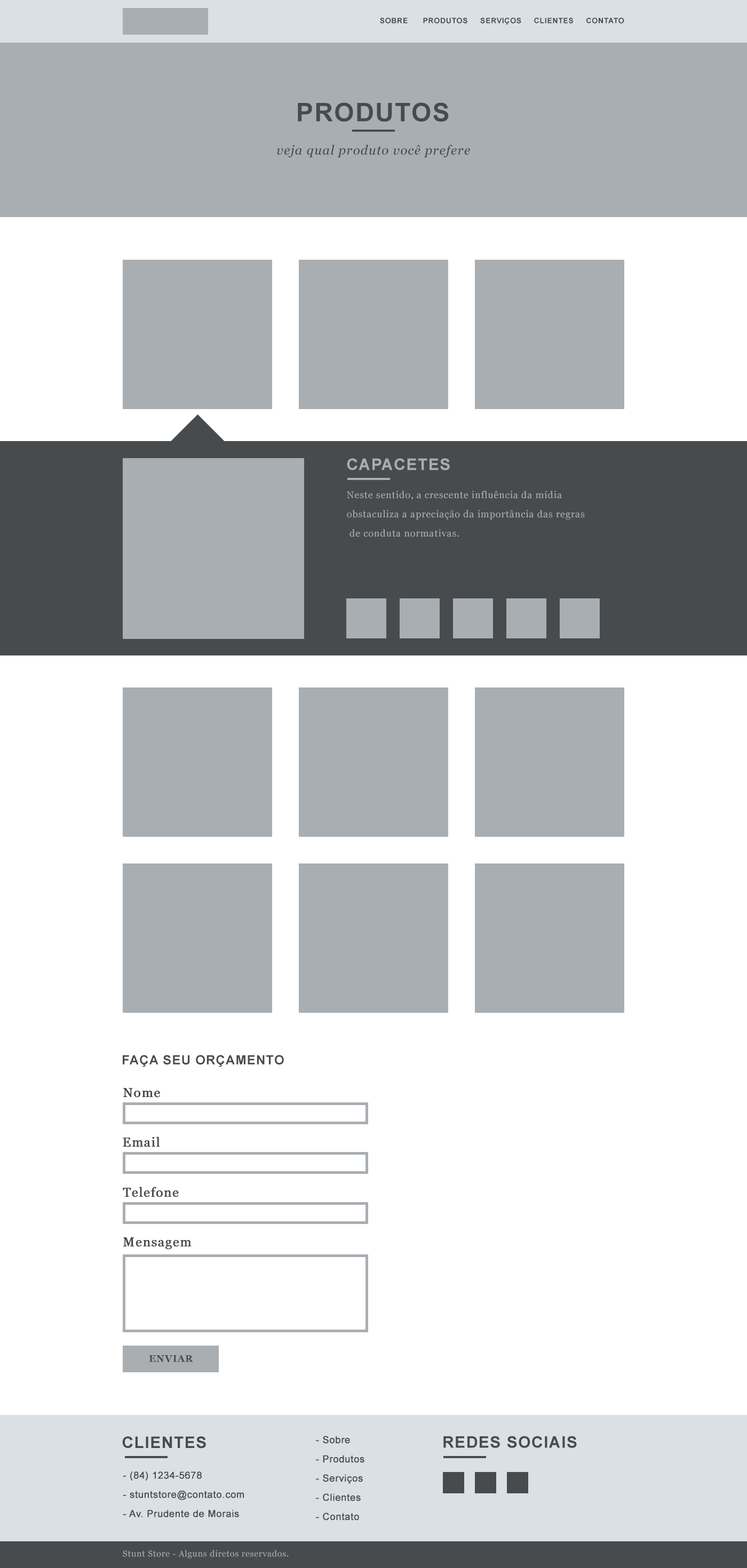
<style>
.page{position:relative;width:747px;height:1568px;background:#ffffff}
.page>*{position:absolute;margin:0}
.t1{font:7.5px "Arial-BoldMT";letter-spacing:0.05em;color:#484b4d;text-transform:uppercase}
.t2{font:25.6px "Arial-BoldMT";letter-spacing:0.05em;color:#484b4d;text-transform:uppercase}
.t3{font:12.8px "Georgia-Italic";letter-spacing:0.05em;color:#484b4d}
.t4{font:16px "Arial-BoldMT";letter-spacing:0.05em;color:#a9aeb3;text-transform:uppercase}
.t5{font:9.6px/19.2px "Georgia";letter-spacing:0.05em;color:#a9aeb3}
.t6{font:12.8px "Arial-BoldMT";letter-spacing:0.05em;color:#484b4d;text-transform:uppercase}
.t7{font:12.8px "Georgia";letter-spacing:0.05em;color:#484b4d;font-weight:bold}
.t8{font:9.6px "Georgia-Bold";letter-spacing:0.05em;color:#484b4d;text-transform:uppercase}
.t9{font:16px "Arial-BoldMT";letter-spacing:0.05em;color:#484b4d;text-transform:uppercase}
.t10{font:9.6px/19.2px "ArialMT";letter-spacing:0.025em;color:#484b4d;font-weight:bold}
.t11{font:8.5px "Georgia";letter-spacing:0.05em;color:#a9aeb3}
</style>
<div class="page">
<p class="t1" style="left:380px;top:18px;width:244px;height:7px">Sobre      produtos     serviços     Clientes     contato</p>
<p class="t2" style="left:298px;top:102px;width:151px;height:20px">produtos</p>
<p class="t3" style="left:276px;top:145px;width:194px;height:12px">veja qual produto você prefere</p>
<p class="t4" style="left:347px;top:458px;width:103px;height:12px">capacetes</p>
<p class="t5" style="left:347px;top:491px;width:238px;height:46px">Neste sentido, a crescente influência da mídia<br>obstaculiza a apreciação da importância das regras<br> de conduta normativas.</p>
<p class="t6" style="left:123px;top:1055px;width:161px;height:12px">Faça seu orçamento</p>
<p class="t7" style="left:123px;top:1088px;width:37px;height:10px">Nome</p>
<p class="t7" style="left:123px;top:1137px;width:37px;height:10px">Email</p>
<p class="t7" style="left:123px;top:1187px;width:56px;height:10px">Telefone</p>
<p class="t7" style="left:123px;top:1237px;width:68px;height:13px">Mensagem</p>
<p class="t8" style="left:149px;top:1355px;width:44px;height:7px">Enviar</p>
<p class="t9" style="left:122px;top:1436px;width:84px;height:13px">Clientes</p>
<p class="t10" style="left:316px;top:1436px;width:48px;height:85px">- Sobre<br>- Produtos<br>- Serviços<br>- Clientes<br>- Contato</p>
<p class="t9" style="left:443px;top:1436px;width:134px;height:12px">Redes Sociais</p>
<p class="t10" style="left:123px;top:1471px;width:121px;height:46px">- (84) 1234-5678<br>- stuntstore@contato.com<br>- Av. Prudente de Morais</p>
<p class="t11" style="left:123px;top:1550px;width:166px;height:8px">Stunt Store - Alguns diretos reservados.</p>
</div>
